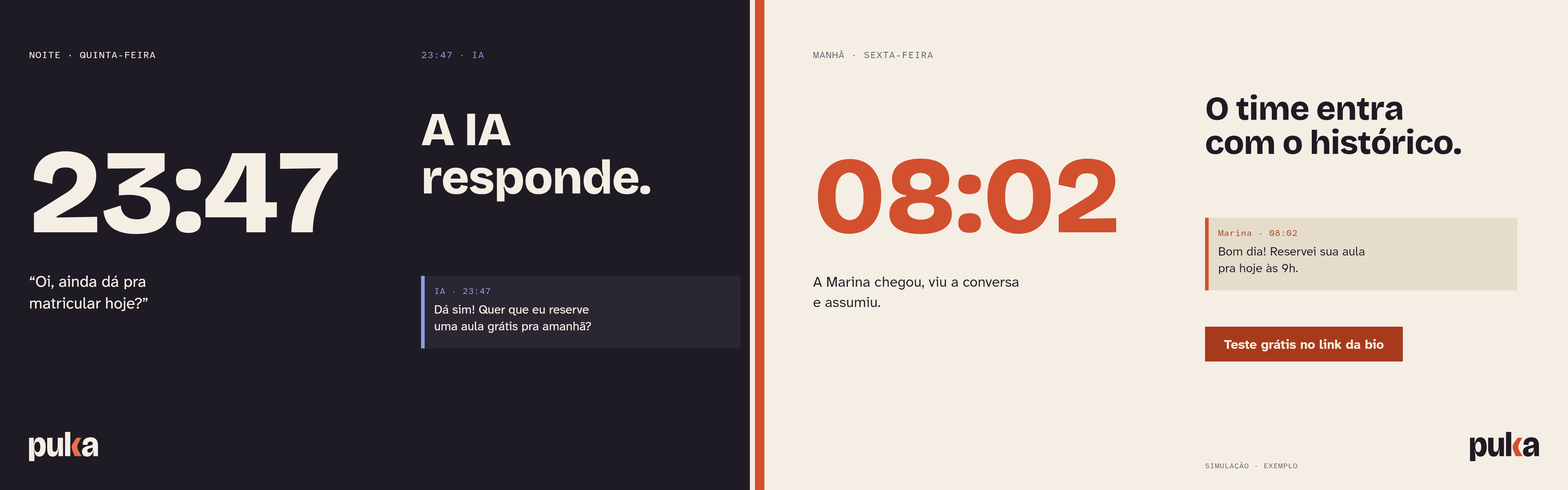
<style>
.page{position:relative;width:1568px;height:490px;background:#f4eee4}
.page>*{position:absolute;margin:0}
.t1{font:9.4px "AtkinsonHyperlegibleMono-Regular";letter-spacing:0.04em;color:#f4eee4}
.t2{font:9.4px "AtkinsonHyperlegibleMono-Regular";letter-spacing:0.04em;color:#8e9be0}
.t3{font:9.4px "AtkinsonHyperlegibleMono-Regular";letter-spacing:0.04em;color:#5e5868}
.t4{font:33.4px/34.1px "BricolageGrotesque-ExtraBold";letter-spacing:-0.012em;color:#1e1b24}
.t5{font:47.2px/48.3px "BricolageGrotesque-ExtraBold";letter-spacing:-0.012em;color:#f4eee4}
.t6{font:119.8px "BricolageGrotesque-ExtraBold";letter-spacing:-0.012em;color:#f4eee4}
.t7{font:108.9px "BricolageGrotesque-ExtraBold";letter-spacing:-0.012em;color:#d2502d}
.t8{font:8.7px "AtkinsonHyperlegibleMono-Regular";letter-spacing:0.02em;color:#a83a1c}
.t9{font:12.3px/16.7px "AtkinsonHyperlegibleNext-Regular";color:#1e1b24}
.t10{font:16px/21.8px "AtkinsonHyperlegibleNext-Regular";color:#f4eee4}
.t11{font:14.5px/20.3px "AtkinsonHyperlegibleNext-Regular";color:#1e1b24}
.t12{font:8.7px "AtkinsonHyperlegibleMono-Regular";letter-spacing:0.02em;color:#8e9be0}
.t13{font:12.3px/16.7px "AtkinsonHyperlegibleNext-Regular";color:#f4eee4}
.t14{font:13.1px "AtkinsonHyperlegibleNext-Bold";color:#f4eee4}
.t15{font:7.3px "AtkinsonHyperlegibleMono-Regular";letter-spacing:0.04em;color:#5e5868}
</style>
<div class="page">
<p class="t1" style="left:29px;top:52px;width:126px;height:6px">NOITE · QUINTA-FEIRA</p>
<p class="t2" style="left:422px;top:52px;width:62px;height:6px">23:47 · IA</p>
<p class="t3" style="left:813px;top:50px;width:120px;height:8px">MANHÃ · SEXTA-FEIRA</p>
<p class="t4" style="left:1206px;top:94px;width:255px;height:60px">O time entra<br>com o histórico.</p>
<p class="t5" style="left:421px;top:114px;width:229px;height:87px">A IA<br>responde.</p>
<p class="t6" style="left:34px;top:151px;width:304px;height:83px">23:47</p>
<p class="t7" style="left:818px;top:159px;width:298px;height:75px">08:02</p>
<p class="t8" style="left:1218px;top:230px;width:79px;height:6px">Marina · 08:02</p>
<p class="t9" style="left:1219px;top:247px;width:146px;height:27px">Bom dia! Reservei sua aula<br>pra hoje às 9h.</p>
<p class="t10" style="left:30px;top:275px;width:118px;height:36px">“Oi, ainda dá pra<br>matricular hoje?”</p>
<p class="t11" style="left:813px;top:277px;width:206px;height:30px">A Marina chegou, viu a conversa<br>e assumiu.</p>
<p class="t12" style="left:435px;top:288px;width:55px;height:6px">IA · 23:47</p>
<p class="t13" style="left:435px;top:305px;width:156px;height:28px">Dá sim! Quer que eu reserve<br>uma aula grátis pra amanhã?</p>
<p class="t14" style="left:1224px;top:339px;width:160px;height:12px">Teste grátis no link da bio</p>
<p class="t15" style="left:1205px;top:462px;width:92px;height:7px">SIMULAÇÃO · EXEMPLO</p>
</div>
